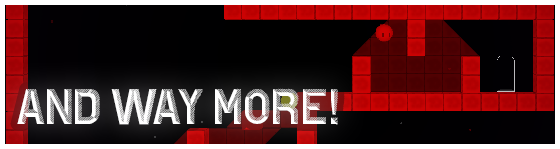
<style>
.page{position:relative;width:560px;height:149px}
.page>*{position:absolute;margin:0}
.t1{font:49.4px "HotelDeParis";color:#ffffff}
</style>
<div class="page">
<p class="t1" style="left:17px;top:88px;width:321px;height:37px">and WAY MORE!</p>
</div>
